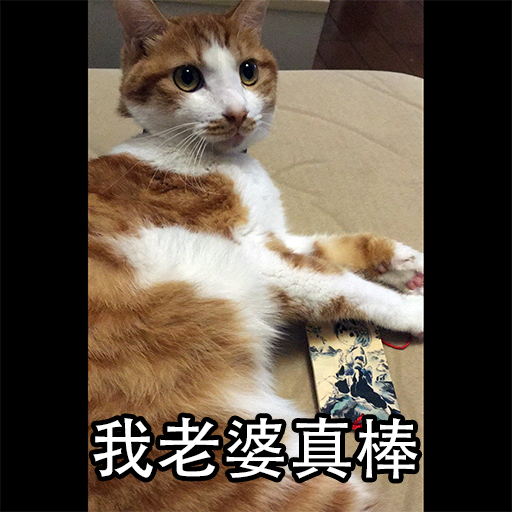
<style>
.page{position:relative;width:512px;height:512px;background:#000000}
.page>*{position:absolute;margin:0}
.t1{font:66px "AdobeHeitiStd-Regular";color:#ffffff}
</style>
<div class="page">
<p class="t1" style="left:93px;top:417px;width:325px;height:62px">我老婆真棒</p>
</div>
